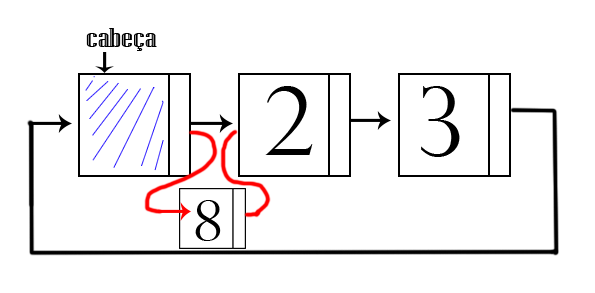
<style>
.page{position:relative;width:595px;height:293px;background:#ffffff}
.page>*{position:absolute;margin:0}
.t1{font:26.6px "NiagaraEngraved-Reg";color:#000000;scale:1.6 1}
.t2{font:92.8px "PerpetuaTitlingMT-Light";color:#000000}
.t3{font:54.9px "PerpetuaTitlingMT-Light";color:#000000}
</style>
<div class="page">
<p class="t1" style="left:86px;top:28px;width:71px;height:23px">cabeça</p>
<p class="t2" style="left:265px;top:86px;width:48px;height:69px">2</p>
<p class="t2" style="left:421px;top:86px;width:39px;height:71px">3</p>
<p class="t3" style="left:195px;top:200px;width:26px;height:41px">8</p>
</div>
